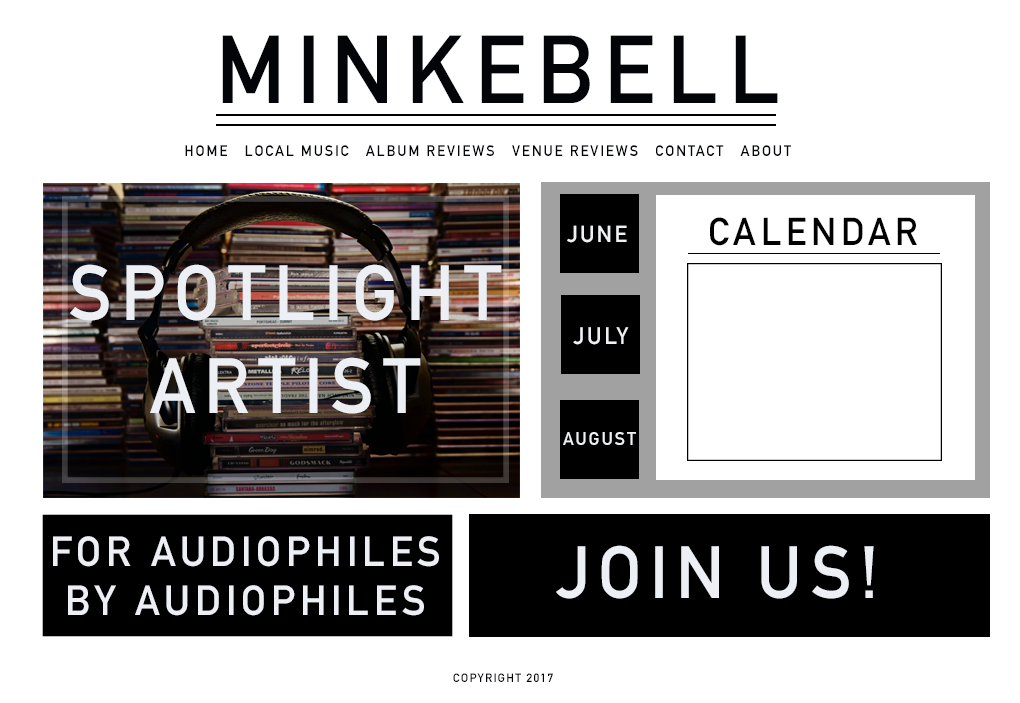
<style>
.page{position:relative;width:1020px;height:703px;background:#ffffff}
.page>*{position:absolute;margin:0}
.t1{font:94.8px "DINAlternate-Bold";letter-spacing:0.1em;color:#020407;text-transform:uppercase}
.t2{font:15.1px "DINAlternate-Bold";letter-spacing:0.1em;color:#020407;text-transform:uppercase}
.t3{font:38.3px "DINAlternate-Bold";letter-spacing:0.1em;color:#000000;text-transform:uppercase}
.t4{font:22.9px "DINAlternate-Bold";letter-spacing:0.1em;color:#eff1f4;text-transform:uppercase}
.t5{font:76.9px "DINAlternate-Bold";letter-spacing:0.1em;color:#ecf0f5;text-transform:uppercase}
.t6{font:23.6px "DINAlternate-Bold";letter-spacing:0.1em;color:#eff1f4;text-transform:uppercase}
.t7{font:18.1px "DINAlternate-Bold";letter-spacing:0.1em;color:#eff1f4;text-transform:uppercase}
.t8{font:41.4px "DINAlternate-Bold";letter-spacing:0.1em;color:#ecf0f5;text-transform:uppercase}
.t9{font:72.8px "DINAlternate-Bold";letter-spacing:0.1em;color:#ecf0f5;text-transform:uppercase}
.t10{font:12px "DINAlternate-Bold";letter-spacing:0.1em;color:#020407;text-transform:uppercase}
</style>
<div class="page">
<p class="t1" style="left:222px;top:35px;width:556px;height:68px">Minkebell</p>
<p class="t2" style="left:185px;top:145px;width:606px;height:11px">home   local music   album reviews   venue reviews   contact   about</p>
<p class="t3" style="left:710px;top:217px;width:207px;height:29px">Calendar</p>
<p class="t4" style="left:567px;top:225px;width:60px;height:18px">june</p>
<p class="t5" style="left:70px;top:264px;width:432px;height:150px;text-align:center">spotlight<br>artist</p>
<p class="t6" style="left:573px;top:327px;width:56px;height:18px">july</p>
<p class="t7" style="left:563px;top:432px;width:73px;height:13px">august</p>
<p class="t8" style="left:53px;top:536px;width:386px;height:80px;text-align:center">for audiophiles<br>by audiophiles</p>
<p class="t9" style="left:556px;top:545px;width:318px;height:54px">join us!</p>
<p class="t10" style="left:453px;top:673px;width:100px;height:9px">copyright 2017</p>
</div>
